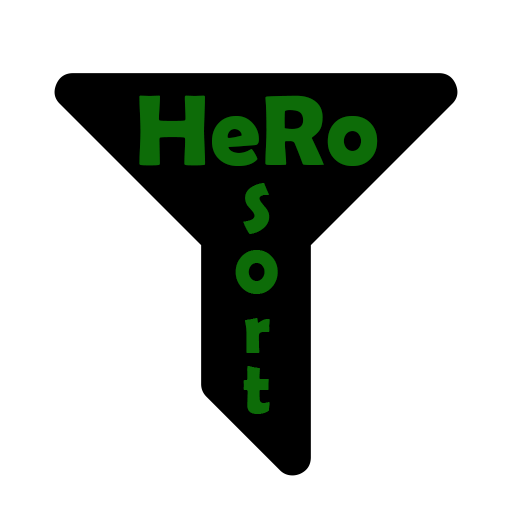
<style>
.page{position:relative;width:512px;height:512px;background:#ffffff}
.page>*{position:absolute;margin:0}
.t1{font:100px "BerlinSansFBDemi-Bold";letter-spacing:0.008em;color:#0d6c08}
.t2{font:72px/60px "BerlinSansFBDemi-Bold";letter-spacing:0.008em;color:#0d6c08}
</style>
<div class="page">
<p class="t1" style="left:139px;top:95px;width:239px;height:71px">HeRo</p>
<p class="t2" style="left:235px;top:183px;width:43px;height:231px;text-align:center">S<br>0<br>r<br>t</p>
</div>
